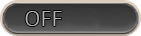
<style>
.page{position:relative;width:141px;height:36px}
.page>*{position:absolute;margin:0}
.t1{font:24px "Calibri-Light";color:#b5b3b4}
</style>
<div class="page">
<p class="t1" style="left:25px;top:11px;width:37px;height:15px">OFF</p>
</div>
